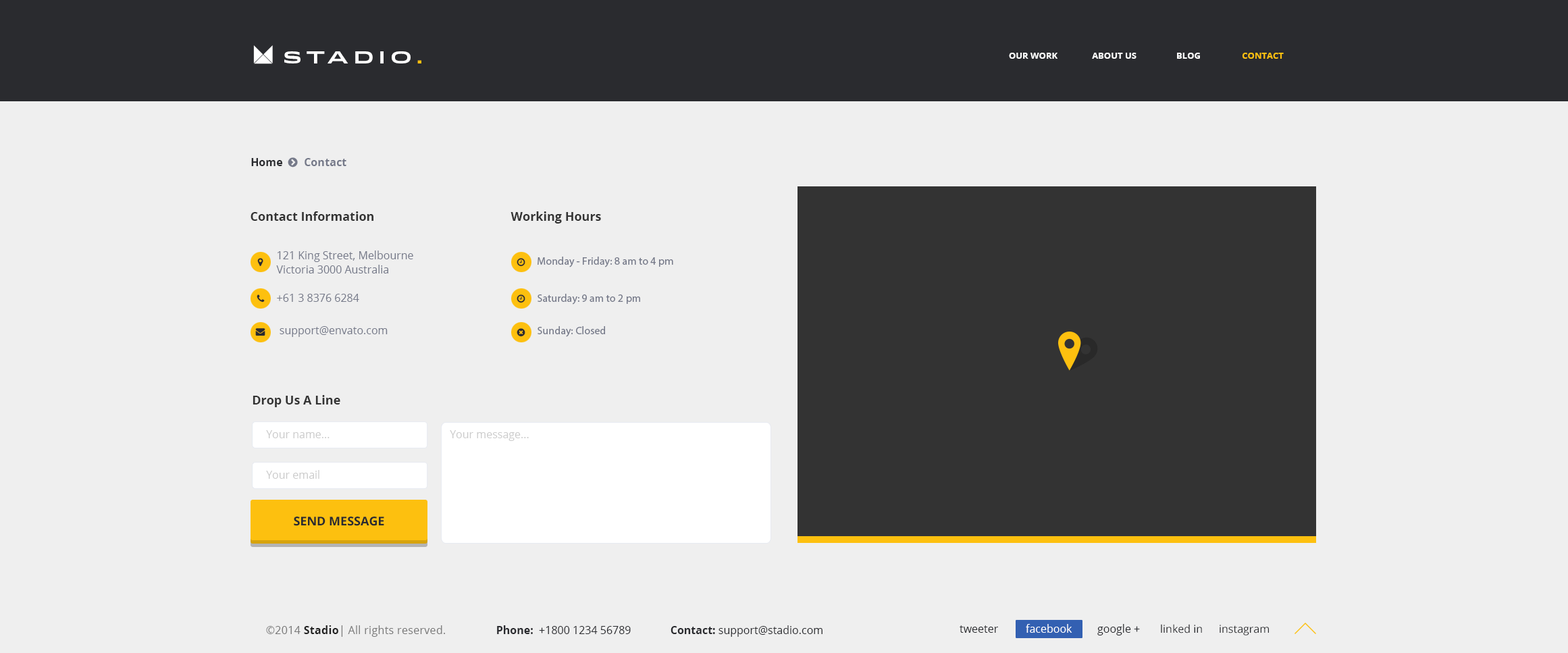
<style>
.page{position:relative;width:1568px;height:653px;background:#efefef}
.page>*{position:absolute;margin:0}
.t1{font:16.2px "Idlewild-Bold";letter-spacing:0.3em;color:#ffffff;text-transform:uppercase}
.t2{font:16.2px "Idlewild-Bold";letter-spacing:0.3em;color:#fdc00f;text-transform:uppercase}
.t3{font:8.8px "OpenSans-Bold";color:#ffffff;text-transform:uppercase}
.t4{font:8.8px "OpenSans-Bold";color:#fdc00f;text-transform:uppercase}
.t5{font:10.8px "OpenSans-Bold";color:#757989}
.t6{font:10.8px "OpenSans-Bold";color:#2a2b2f}
.t7{font:12.2px "OpenSans-Bold";color:#333333}
.t8{font:10.8px/14.4px "OpenSans";color:#757989}
.t9{font:10.8px "MyriadPro-Regular";color:#757989}
.t10{font:10.8px "OpenSans";color:#757989}
.t11{font:10.8px "OpenSans";color:#cccccc}
.t12{font:12.2px "OpenSans-Bold";color:#2a2b2f;text-transform:uppercase}
.t13{font:10.8px "OpenSans";letter-spacing:0.02em;color:#787878}
.t14{font:10.8px "OpenSans-Bold";letter-spacing:0.02em;color:#222222}
.t15{font:10.8px "OpenSans";color:#2a2b2f}
.t16{font:10.8px "OpenSans";color:#ffffff}
</style>
<div class="page">
<p class="t1" style="left:284px;top:51px;width:137px;height:12px">stAdio<span class="t2">.</span></p>
<p class="t3" style="left:1009px;top:53px;width:48px;height:6px">our work</p>
<p class="t3" style="left:1092px;top:53px;width:44px;height:6px">About us</p>
<p class="t3" style="left:1177px;top:53px;width:23px;height:6px">BLOG</p>
<p class="t4" style="left:1242px;top:53px;width:42px;height:6px">Contact</p>
<p class="t5" style="left:251px;top:158px;width:95px;height:8px"><span class="t6">Home        </span>Contact</p>
<p class="t7" style="left:251px;top:211px;width:122px;height:10px">Contact Information</p>
<p class="t7" style="left:511px;top:211px;width:90px;height:13px">Working Hours</p>
<p class="t8" style="left:276px;top:251px;width:137px;height:22px">121 King Street, Melbourne <br>Victoria 3000 Australia</p>
<p class="t9" style="left:538px;top:257px;width:135px;height:10px">Monday - Friday: 8 am to 4 pm</p>
<p class="t10" style="left:277px;top:294px;width:82px;height:8px">+61 3 8376 6284</p>
<p class="t9" style="left:538px;top:294px;width:102px;height:11px">Saturday: 9 am to 2 pm</p>
<p class="t10" style="left:280px;top:326px;width:108px;height:11px">support@envato.com</p>
<p class="t9" style="left:538px;top:326px;width:67px;height:11px">Sunday: Closed</p>
<p class="t7" style="left:253px;top:395px;width:87px;height:12px">Drop Us A Line</p>
<p class="t11" style="left:266px;top:430px;width:64px;height:8px">Your name...</p>
<p class="t11" style="left:450px;top:430px;width:79px;height:11px">Your message...</p>
<p class="t11" style="left:266px;top:470px;width:53px;height:9px">Your email</p>
<p class="t12" style="left:294px;top:517px;width:90px;height:9px">SEND MESSAGE</p>
<p class="t13" style="left:266px;top:625px;width:179px;height:12px">©2014 <span class="t14">Stadio</span>| All rights reserved.</p>
<p class="t15" style="left:497px;top:625px;width:325px;height:12px"><span class="t6">Phone:</span>  +1800 1234 56789              <span class="t6">Contact:</span> support@stadio.com</p>
<p class="t15" style="left:960px;top:625px;width:38px;height:8px">tweeter</p>
<p class="t16" style="left:1026px;top:624px;width:46px;height:9px">facebook</p>
<p class="t15" style="left:1097px;top:624px;width:43px;height:11px">google +</p>
<p class="t15" style="left:1161px;top:624px;width:41px;height:9px">linked in</p>
<p class="t15" style="left:1220px;top:625px;width:49px;height:10px">instagram</p>
</div>
